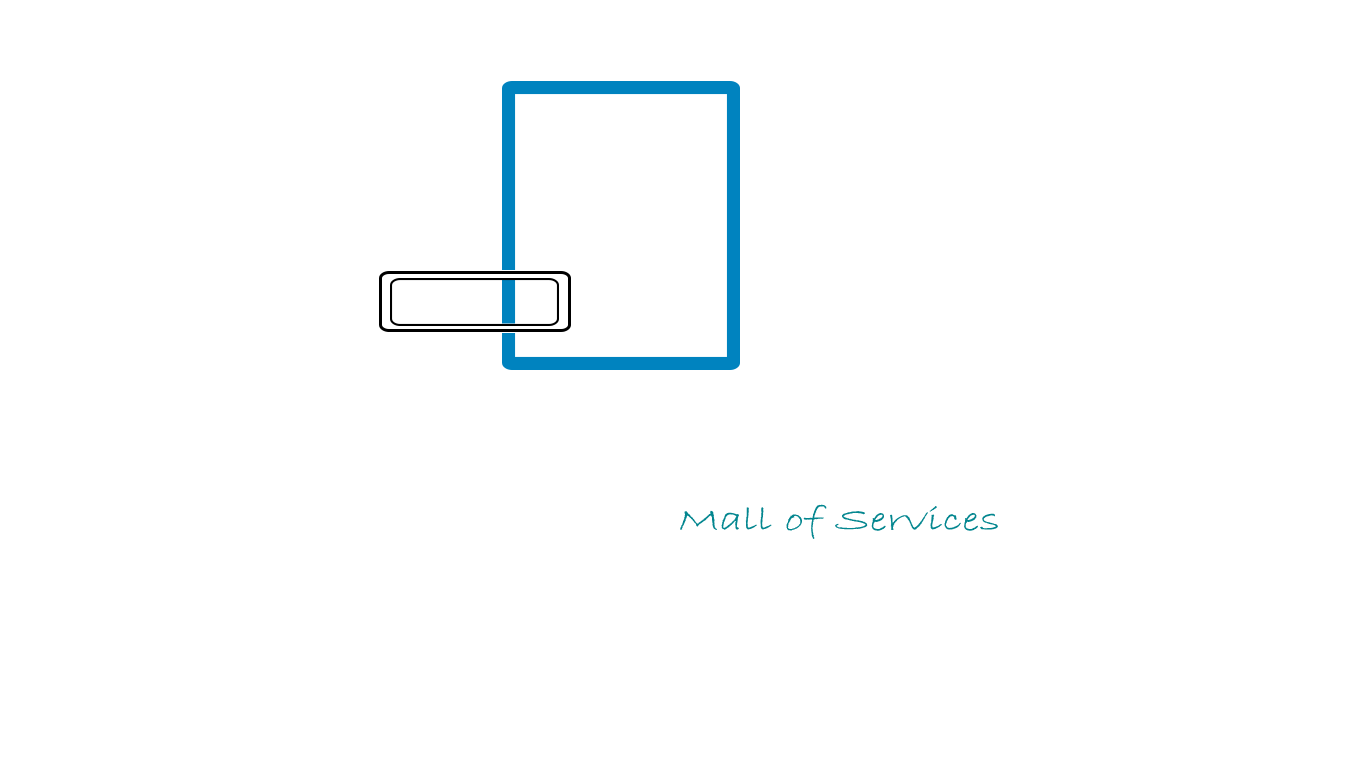
<style>
.page{position:relative;width:1360px;height:768px;background:#ffffff}
.page>*{position:absolute;margin:0}
.t1{font:34.5px "BradleyHandITC";color:#03868f;scale:1.39 1}
</style>
<div class="page">
<p class="t1" style="left:680px;top:504px;width:318px;height:35px">Mall of Services</p>
</div>
